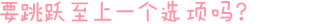
<style>
.page{position:relative;width:314px;height:24px;background:#ffffff}
.page>*{position:absolute;margin:0}
.t1{font:26px "¢è?";color:#ff93a5}
</style>
<div class="page">
<p class="t1" style="left:0px;top:0px;width:247px;height:23px">要跳跃至上一个选项吗？</p>
</div>
